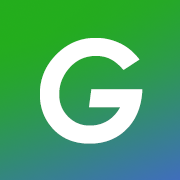
<style>
.page{position:relative;width:180px;height:180px}
.page>*{position:absolute;margin:0}
.t1{font:140px "CenturyGothic-BoldItalic";color:#ffffff}
</style>
<div class="page">
<p class="t1" style="left:40px;top:38px;width:103px;height:106px">G</p>
</div>
